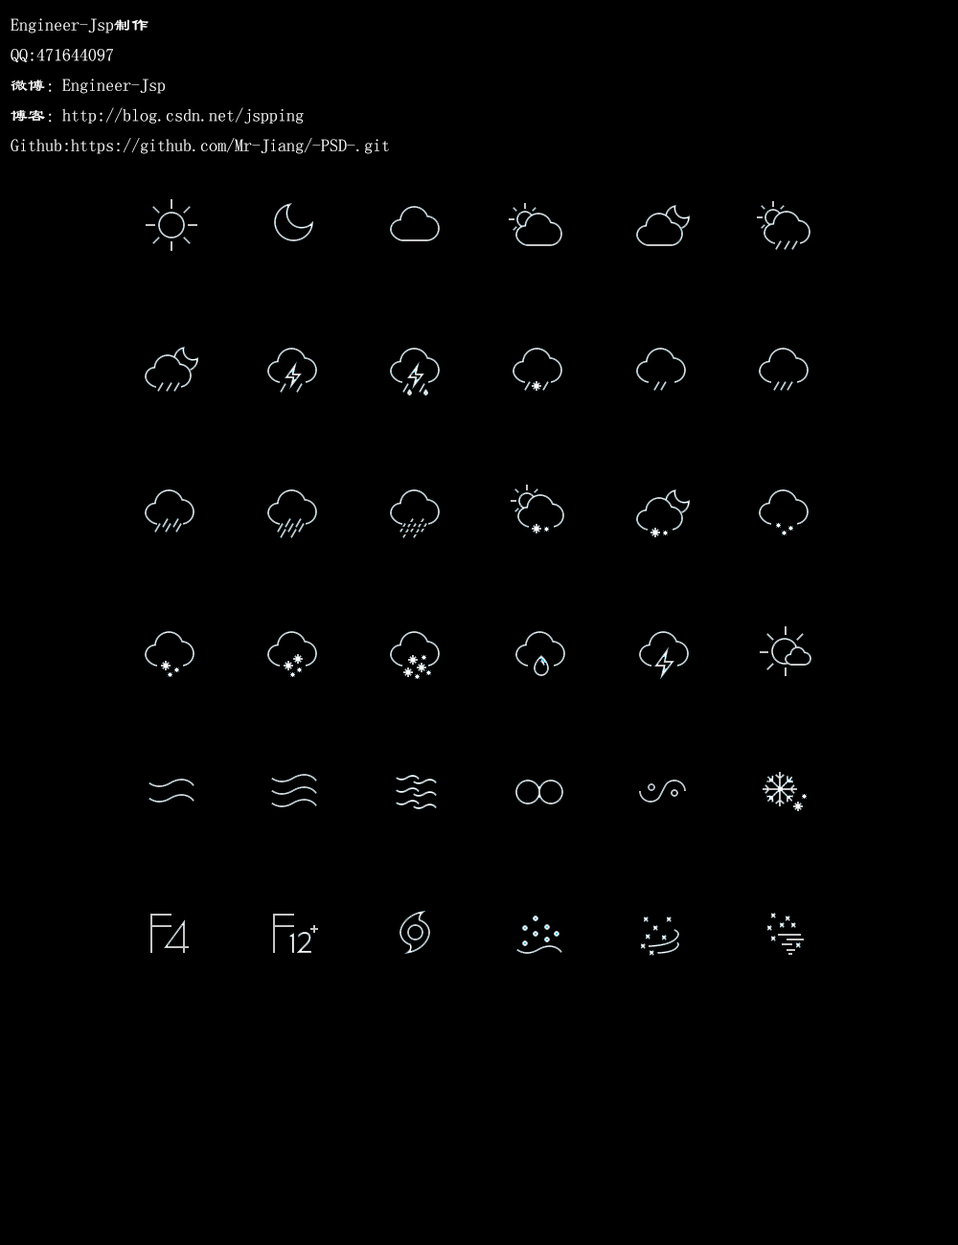
<style>
.page{position:relative;width:958px;height:1245px;background:#000000}
.page>*{position:absolute;margin:0}
.t1{font:17.2px "LiSu";color:#fefefe}
</style>
<div class="page">
<p class="t1" style="left:11px;top:18px;width:378px;height:136px">Engineer-Jsp制作<br>QQ:471644097<br>微博：Engineer-Jsp<br>博客：http://blog.csdn.net/jspping<br>Github:https://github.com/Mr-Jiang/-PSD-.git</p>
</div>
